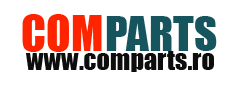
<style>
.page{position:relative;width:250px;height:89px;background:#ffffff}
.page>*{position:absolute;margin:0}
.t1{font:45px "Impact";color:#ff2400}
.t2{font:44px "Impact";color:#16555d}
.t3{font:26.1px "Impact";color:#0e0d0d}
</style>
<div class="page">
<p class="t1" style="left:22px;top:14px;width:80px;height:38px">COM</p>
<p class="t2" style="left:106px;top:16px;width:111px;height:35px">PARTS</p>
<p class="t3" style="left:26px;top:51px;width:188px;height:21px">www.comparts.ro</p>
</div>
